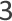
<style>
.page{position:relative;width:12px;height:21px;background:#ffffff}
.page>*{position:absolute;margin:0}
.t1{font:30px "Calibri";color:#3c3c3c}
</style>
<div class="page">
<p class="t1" style="left:0px;top:0px;width:12px;height:21px">3</p>
</div>
